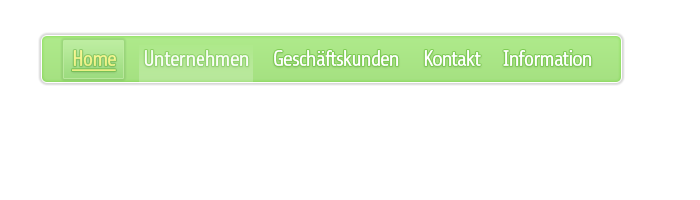
<style>
.page{position:relative;width:700px;height:200px;background:#ffffff}
.page>*{position:absolute;margin:0}
.t1{font:22px "Share-Regular";letter-spacing:-0.07em;color:#eff38b;text-decoration:underline}
.t2{font:22px "Share-Regular";letter-spacing:-0.05em;color:#ffffff}
.t3{font:22px "Share-Regular";letter-spacing:-0.07em;color:#ffffff}
</style>
<div class="page">
<p class="t1" style="left:72px;top:50px;width:44px;height:21px">Home</p>
<p class="t2" style="left:144px;top:50px;width:105px;height:16px">Unternehmen</p>
<p class="t3" style="left:274px;top:50px;width:125px;height:16px">Geschäftskunden</p>
<p class="t3" style="left:424px;top:50px;width:57px;height:16px">Kontakt</p>
<p class="t3" style="left:503px;top:50px;width:89px;height:16px">Information</p>
</div>
